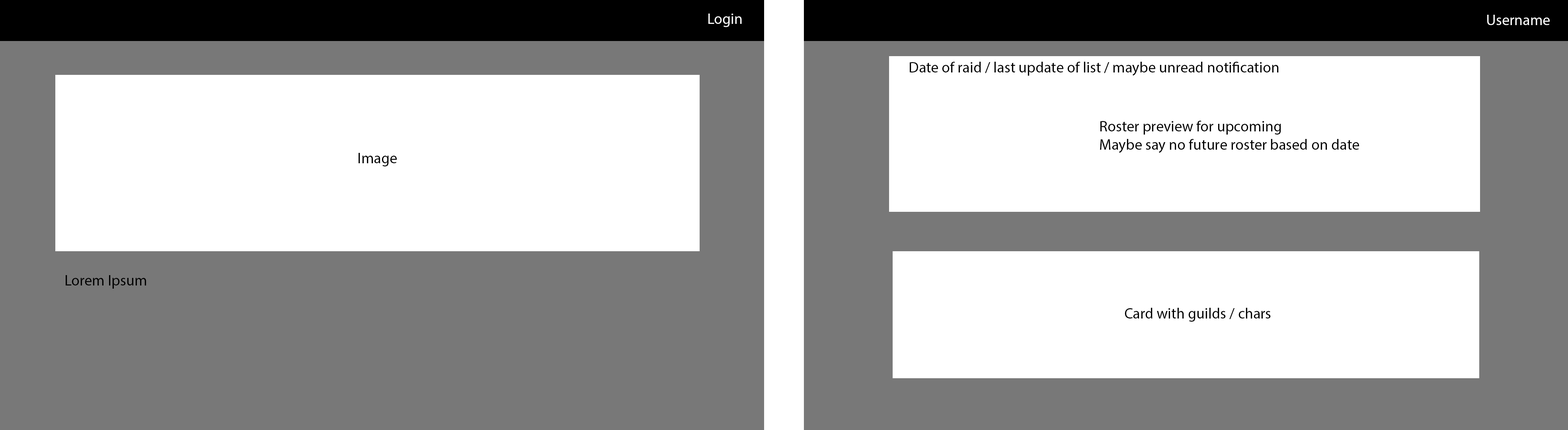
<style>
.page{position:relative;width:1568px;height:430px;background:#ffffff}
.page>*{position:absolute;margin:0}
.t1{font:15.1px "MyriadPro-Regular";color:#ffffff}
.t2{font:15.1px "MyriadPro-Regular";color:#000000}
</style>
<div class="page">
<p class="t1" style="left:708px;top:14px;width:34px;height:13px">Login</p>
<p class="t1" style="left:1487px;top:15px;width:63px;height:10px">Username</p>
<p class="t2" style="left:910px;top:62px;width:369px;height:14px">Date of raid / last update of list / maybe unread notification</p>
<p class="t2" style="left:1100px;top:121px;width:259px;height:32px">Roster preview for upcoming<br>Maybe say no future roster based on date</p>
<p class="t2" style="left:359px;top:153px;width:38px;height:13px">Image</p>
<p class="t2" style="left:66px;top:275px;width:80px;height:14px">Lorem Ipsum</p>
<p class="t2" style="left:1125px;top:308px;width:146px;height:14px">Card with guilds / chars</p>
</div>
